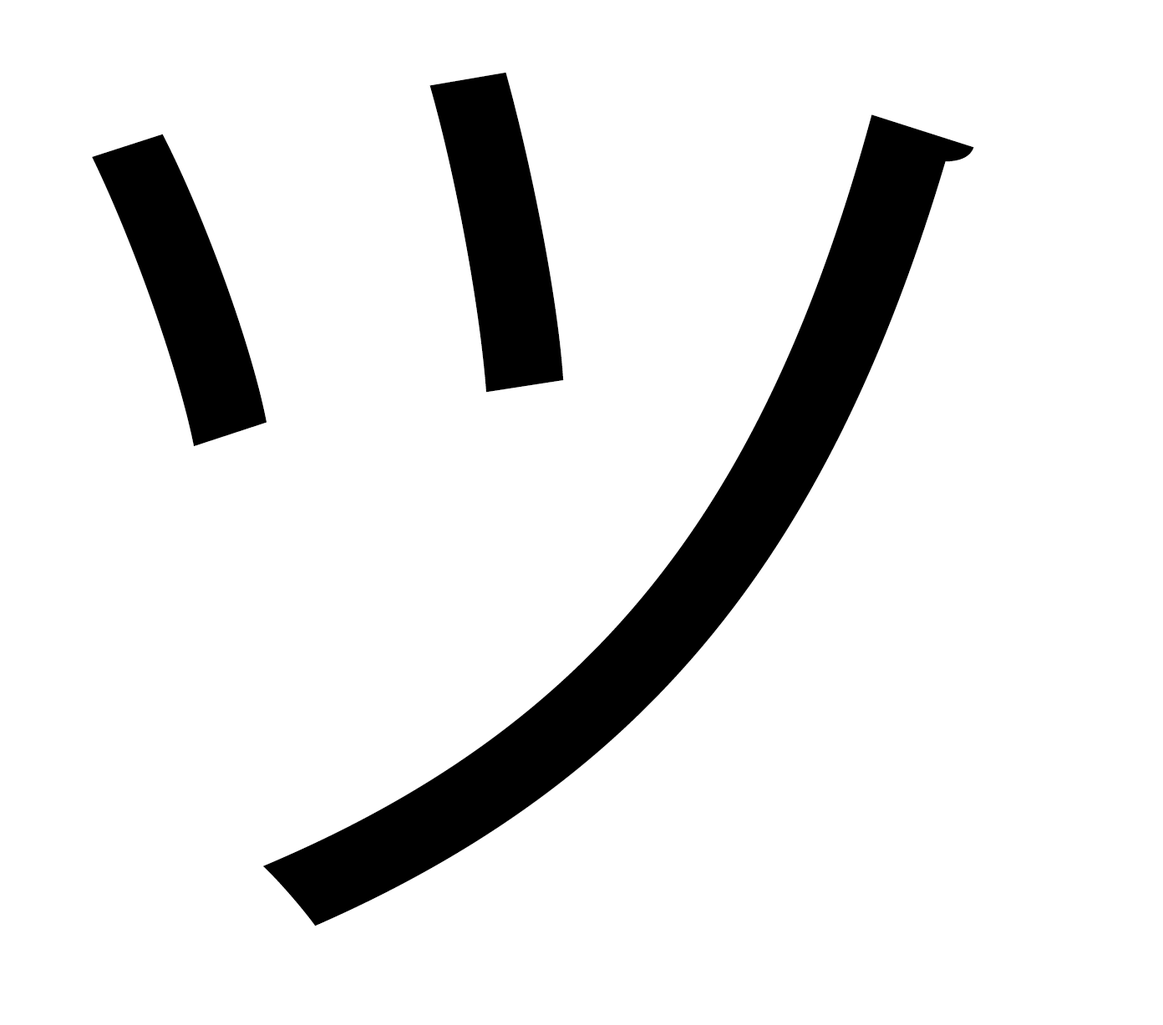
<style>
.page{position:relative;width:1163px;height:1025px;background:#ffffff}
.page>*{position:absolute;margin:0}
.t1{font:1082.9px "KozGoPr6N-Regular";color:#000000}
</style>
<div class="page">
<p class="t1" style="left:92px;top:72px;width:882px;height:855px">ツ</p>
</div>
